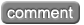
<style>
.page{position:relative;width:84px;height:25px;background:#828282}
.page>*{position:absolute;margin:0}
.t1{font:16px "ArialMT";color:#fefefe}
</style>
<div class="page">
<p class="t1" style="left:7px;top:6px;width:66px;height:13px">comment</p>
</div>
